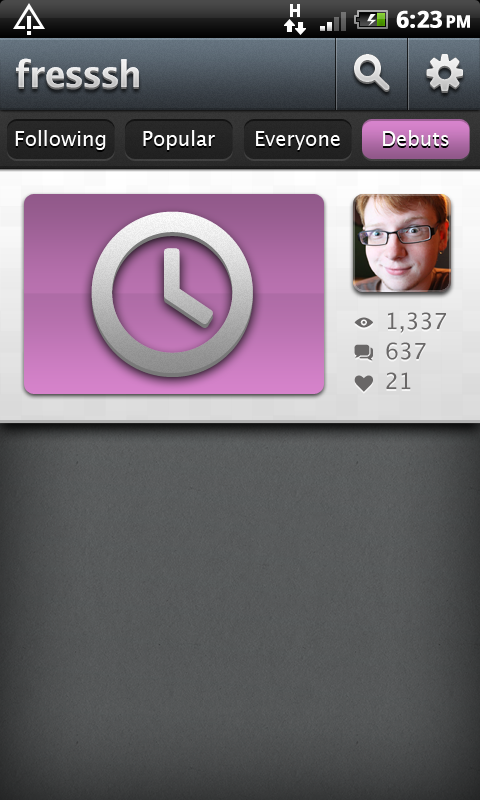
<style>
.page{position:relative;width:480px;height:800px}
.page>*{position:absolute;margin:0}
.t1{font:23px "DroidSans-Bold";letter-spacing:0.07em;color:#ffffff;font-weight:bold}
.t2{font:17px "DroidSans-Bold";letter-spacing:0.07em;color:#ffffff;font-weight:bold}
.t3{font:44px "Pictos";color:#e2e2e2}
.t4{font:44px "Pictos";color:#e0e0e0}
.t5{font:36px "LucidaGrande-Bold";color:#dddddd}
.t6{font:20px "LucidaGrande";color:#ffffff}
.t7{font:192px "Pictos"}
.t8{font:22px/15px "LucidaGrande";color:#696767}
.t9{font:22px/15px "Pictos";color:#696767}
</style>
<div class="page">
<p class="t1" style="left:396px;top:10px;width:74px;height:18px">6:23<span class="t2">PM</span></p>
<p class="t3" style="left:354px;top:54px;width:36px;height:36px">s</p>
<p class="t3" style="left:354px;top:54px;width:36px;height:36px">s</p>
<p class="t4" style="left:426px;top:54px;width:37px;height:37px">y</p>
<p class="t4" style="left:426px;top:54px;width:37px;height:37px">y</p>
<p class="t5" style="left:16px;top:58px;width:123px;height:30px">fresssh</p>
<p class="t5" style="left:16px;top:58px;width:123px;height:30px">fresssh</p>
<p class="t6" style="left:15px;top:130px;width:91px;height:20px">Following</p>
<p class="t6" style="left:143px;top:130px;width:72px;height:20px">Popular</p>
<p class="t6" style="left:256px;top:131px;width:84px;height:19px">Everyone</p>
<p class="t6" style="left:383px;top:130px;width:66px;height:16px">Debuts</p>
<p class="t7" style="left:91px;top:211px;width:162px;height:162px">t</p>
<p class="t7" style="left:91px;top:211px;width:162px;height:162px">t</p>
<p class="t8" style="left:354px;top:312px;width:92px;height:80px"><span class="t9">E </span>1,337<br><br><span class="t9">q </span>637<br><br><span class="t9">k </span>21</p>
</div>
